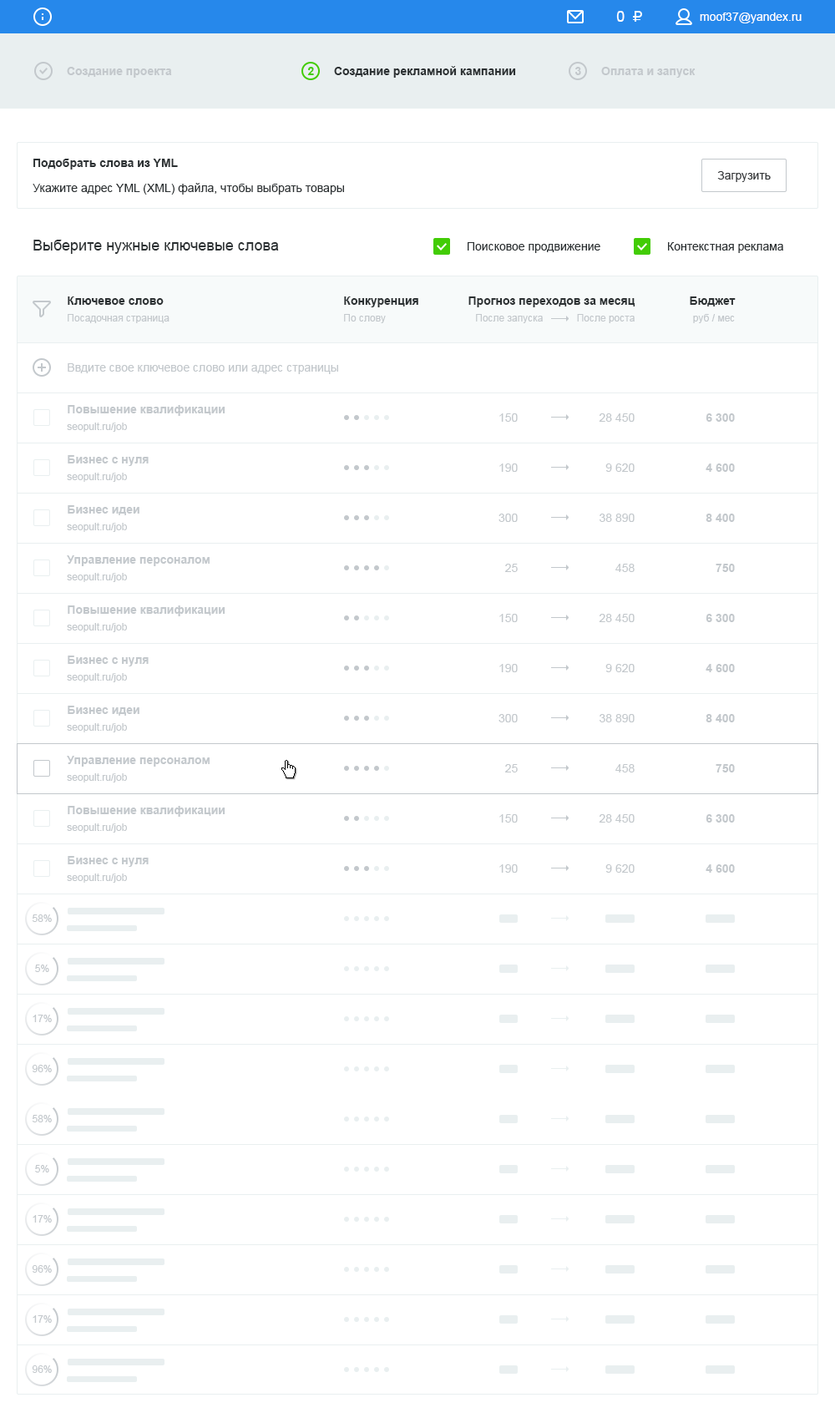
<style>
.page{position:relative;width:835px;height:1428px;background:#ffffff}
.page>*{position:absolute;margin:0}
.t1{font:15px "ArialMT";color:#ffffff}
.t2{font:11.7px "ArialMT";color:#ffffff}
.t3{font:11.7px "Arial-BoldMT";color:#2c3133}
.t4{font:11.7px "Arial-BoldMT";color:#c3c8cc}
.t5{font:11.7px "Arial-BoldMT";color:#42cc05}
.t6{font:11.7px "ArialMT";color:#313436}
.t7{font:11.7px "ArialMT";color:#2c3133}
.t8{font:15px "ArialMT";color:#2c3133}
.t9{font:10px "ArialMT";color:#c3c8cc}
.t10{font:11.7px "ArialMT";color:#c3c8cc}
</style>
<div class="page">
<p class="t1" style="left:616px;top:11px;width:9px;height:11px">0</p>
<p class="t2" style="left:700px;top:13px;width:102px;height:10px">moof37@yandex.ru</p>
<p class="t3" style="left:334px;top:66px;width:182px;height:12px">Создание рекламной кампании</p>
<p class="t4" style="left:67px;top:67px;width:105px;height:11px">Создание проекта</p>
<p class="t5" style="left:307px;top:67px;width:7px;height:8px">2</p>
<p class="t4" style="left:575px;top:67px;width:6px;height:8px">3</p>
<p class="t4" style="left:601px;top:67px;width:95px;height:11px">Оплата и запуск</p>
<p class="t3" style="left:33px;top:159px;width:145px;height:11px">Подобрать слова из YML</p>
<p class="t6" style="left:717px;top:171px;width:54px;height:11px">Загрузить</p>
<p class="t7" style="left:33px;top:183px;width:311px;height:12px">Укажите адрес YML (XML) файла, чтобы выбрать товары</p>
<p class="t8" style="left:33px;top:240px;width:246px;height:14px">Выберите нужные ключевые слова</p>
<p class="t7" style="left:468px;top:242px;width:132px;height:11px">Поисковое продвижение</p>
<p class="t7" style="left:668px;top:242px;width:115px;height:11px">Контекстная реклама</p>
<p class="t3" style="left:68px;top:296px;width:96px;height:9px">Ключевое слово</p>
<p class="t3" style="left:344px;top:296px;width:74px;height:11px">Конкуренция</p>
<p class="t3" style="left:468px;top:296px;width:167px;height:11px">Прогноз переходов за месяц</p>
<p class="t3" style="left:690px;top:296px;width:46px;height:10px">Бюджет</p>
<p class="t9" style="left:68px;top:314px;width:102px;height:9px">Посадочная страница</p>
<p class="t9" style="left:344px;top:314px;width:42px;height:9px">По слову</p>
<p class="t9" style="left:476px;top:314px;width:67px;height:9px">После запуска</p>
<p class="t9" style="left:577px;top:314px;width:58px;height:9px">После роста</p>
<p class="t9" style="left:693px;top:314px;width:42px;height:9px">руб / мес</p>
<p class="t10" style="left:68px;top:363px;width:270px;height:11px">Ввдите свое ключевое слово или адрес страницы</p>
<p class="t4" style="left:68px;top:405px;width:157px;height:11px">Повышение квалификации</p>
<p class="t10" style="left:499px;top:413px;width:19px;height:9px">150</p>
<p class="t10" style="left:599px;top:413px;width:36px;height:9px">28 450</p>
<p class="t4" style="left:706px;top:413px;width:29px;height:9px">6 300</p>
<p class="t9" style="left:67px;top:423px;width:60px;height:9px">seopult.ru/job</p>
<p class="t4" style="left:68px;top:455px;width:81px;height:11px">Бизнес с нуля</p>
<p class="t9" style="left:67px;top:473px;width:60px;height:9px">seopult.ru/job</p>
<p class="t10" style="left:499px;top:463px;width:19px;height:9px">190</p>
<p class="t10" style="left:605px;top:463px;width:30px;height:9px">9 620</p>
<p class="t4" style="left:706px;top:463px;width:29px;height:9px">4 600</p>
<p class="t4" style="left:68px;top:505px;width:71px;height:10px">Бизнес идеи</p>
<p class="t10" style="left:499px;top:514px;width:19px;height:8px">300</p>
<p class="t10" style="left:600px;top:514px;width:35px;height:8px">38 890</p>
<p class="t4" style="left:706px;top:514px;width:29px;height:8px">8 400</p>
<p class="t9" style="left:67px;top:523px;width:60px;height:9px">seopult.ru/job</p>
<p class="t4" style="left:67px;top:555px;width:143px;height:11px">Управление персоналом</p>
<p class="t10" style="left:505px;top:564px;width:13px;height:8px">25</p>
<p class="t10" style="left:615px;top:564px;width:20px;height:8px">458</p>
<p class="t4" style="left:716px;top:564px;width:19px;height:8px">750</p>
<p class="t9" style="left:67px;top:573px;width:60px;height:9px">seopult.ru/job</p>
<p class="t4" style="left:68px;top:605px;width:157px;height:11px">Повышение квалификации</p>
<p class="t10" style="left:499px;top:614px;width:19px;height:8px">150</p>
<p class="t10" style="left:599px;top:614px;width:36px;height:8px">28 450</p>
<p class="t4" style="left:706px;top:614px;width:29px;height:8px">6 300</p>
<p class="t9" style="left:67px;top:623px;width:60px;height:9px">seopult.ru/job</p>
<p class="t4" style="left:68px;top:656px;width:81px;height:10px">Бизнес с нуля</p>
<p class="t10" style="left:499px;top:664px;width:19px;height:8px">190</p>
<p class="t10" style="left:605px;top:664px;width:30px;height:8px">9 620</p>
<p class="t4" style="left:706px;top:664px;width:29px;height:8px">4 600</p>
<p class="t9" style="left:67px;top:673px;width:60px;height:9px">seopult.ru/job</p>
<p class="t4" style="left:68px;top:706px;width:71px;height:10px">Бизнес идеи</p>
<p class="t10" style="left:499px;top:714px;width:19px;height:8px">300</p>
<p class="t10" style="left:600px;top:714px;width:35px;height:8px">38 890</p>
<p class="t4" style="left:706px;top:714px;width:29px;height:8px">8 400</p>
<p class="t9" style="left:67px;top:723px;width:60px;height:9px">seopult.ru/job</p>
<p class="t4" style="left:67px;top:756px;width:143px;height:11px">Управление персоналом</p>
<p class="t9" style="left:67px;top:773px;width:60px;height:9px">seopult.ru/job</p>
<p class="t10" style="left:505px;top:764px;width:13px;height:8px">25</p>
<p class="t10" style="left:615px;top:764px;width:20px;height:8px">458</p>
<p class="t4" style="left:716px;top:764px;width:19px;height:8px">750</p>
<p class="t4" style="left:68px;top:806px;width:157px;height:11px">Повышение квалификации</p>
<p class="t10" style="left:499px;top:814px;width:19px;height:9px">150</p>
<p class="t10" style="left:599px;top:814px;width:36px;height:9px">28 450</p>
<p class="t4" style="left:706px;top:814px;width:29px;height:9px">6 300</p>
<p class="t9" style="left:67px;top:823px;width:60px;height:10px">seopult.ru/job</p>
<p class="t4" style="left:68px;top:856px;width:81px;height:11px">Бизнес с нуля</p>
<p class="t10" style="left:499px;top:864px;width:19px;height:9px">190</p>
<p class="t10" style="left:605px;top:864px;width:30px;height:9px">9 620</p>
<p class="t4" style="left:706px;top:864px;width:29px;height:9px">4 600</p>
<p class="t9" style="left:67px;top:873px;width:60px;height:10px">seopult.ru/job</p>
<p class="t9" style="left:32px;top:914px;width:20px;height:8px">58%</p>
<p class="t9" style="left:35px;top:964px;width:14px;height:8px">5%</p>
<p class="t9" style="left:33px;top:1015px;width:19px;height:7px">17%</p>
<p class="t9" style="left:32px;top:1065px;width:20px;height:7px">96%</p>
<p class="t9" style="left:32px;top:1115px;width:20px;height:7px">58%</p>
<p class="t9" style="left:35px;top:1165px;width:14px;height:7px">5%</p>
<p class="t9" style="left:33px;top:1215px;width:19px;height:8px">17%</p>
<p class="t9" style="left:32px;top:1265px;width:20px;height:8px">96%</p>
<p class="t9" style="left:33px;top:1315px;width:19px;height:8px">17%</p>
<p class="t9" style="left:32px;top:1365px;width:20px;height:8px">96%</p>
</div>
